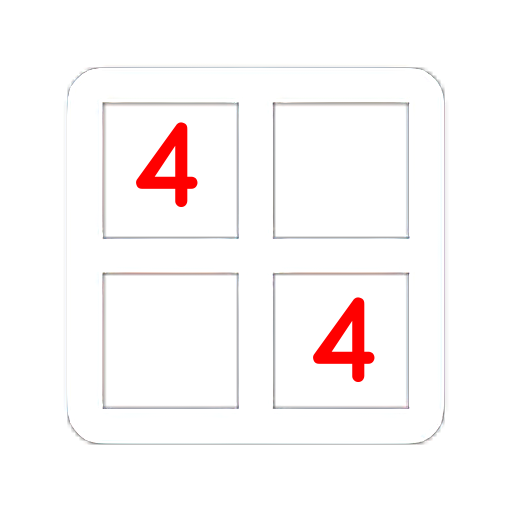
<style>
.page{position:relative;width:512px;height:512px;background:#ffffff}
.page>*{position:absolute;margin:0}
.t1{font:120px "ArciformSanscyr-lat-Regular";color:#ff0000}
</style>
<div class="page">
<p class="t1" style="left:136px;top:122px;width:62px;height:85px">4</p>
<p class="t1" style="left:313px;top:297px;width:62px;height:85px">4</p>
</div>
